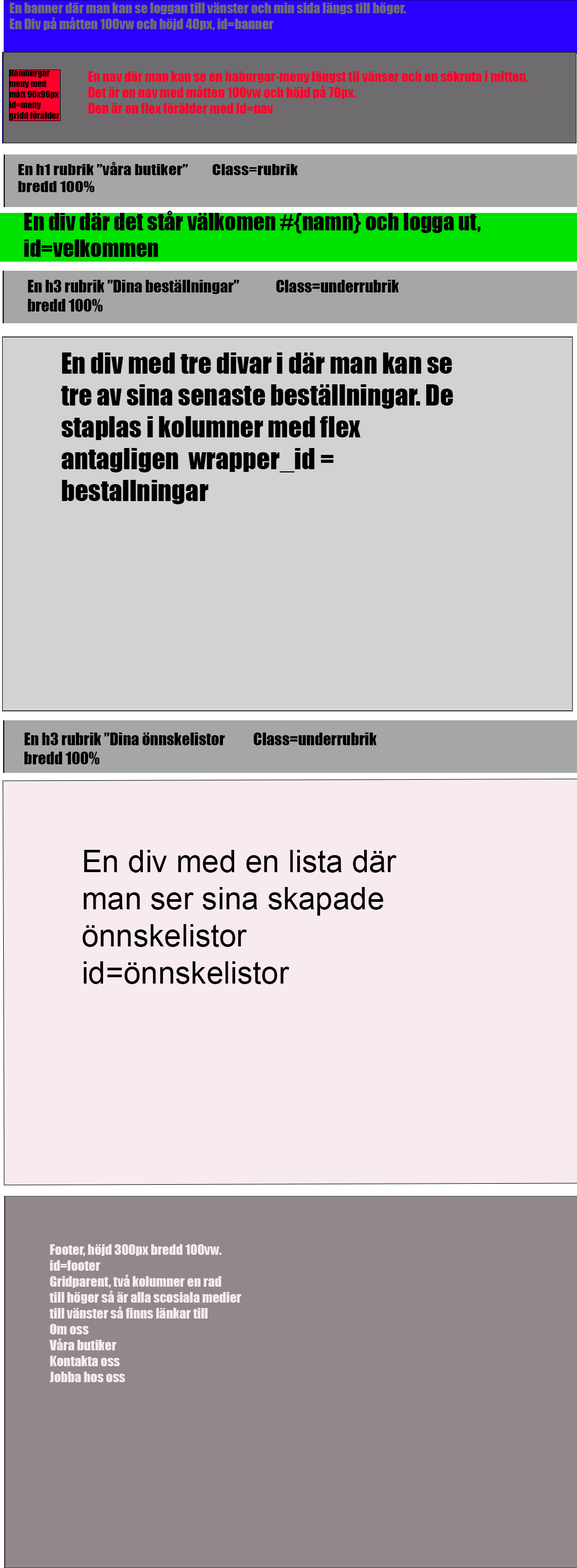
<style>
.page{position:relative;width:577px;height:1568px;background:#f7eaf0}
.page>*{position:absolute;margin:0}
.t1{font:13.3px "Impact";color:#6f6c70}
.t2{font:8.8px "Impact";color:#020202}
.t3{font:13.3px "Impact";color:#ff002a}
.t4{font:14.4px "Impact";color:#000000;scale:1.13 1}
.t5{font:22.1px "Impact";color:#000000}
.t6{font:15.9px "Impact";color:#000000}
.t7{font:26.5px "Impact";color:#000000}
.t8{font:31px "ArialMT";color:#000000}
.t9{font:13.3px "Impact";color:#f7eaf0}
</style>
<div class="page">
<p class="t1" style="left:10px;top:3px;width:396px;height:28px">En banner där man kan se loggan till vänster och min sida längs till höger.<br>En Div på måtten 100vw och höjd 40px, id=banner</p>
<p class="t2" style="left:9px;top:70px;width:50px;height:50px">Hamburgar meny med mått 96x96px<br>id=meny<br>gridd förälder</p>
<p class="t3" style="left:88px;top:71px;width:441px;height:43px">En nav där man kan se en haburgar-meny längst til vänser och en sökruta i mitten.<br>Det är en nav med måtten 100vw och höjd på 70px. <br>Den är en flex förälder med id=nav</p>
<p class="t4" style="left:18px;top:162px;width:280px;height:30px">En h1 rubrik ”våra butiker”  Class=rubrik<br>bredd 100%</p>
<p class="t5" style="left:24px;top:211px;width:457px;height:46px">En div där det står välkomen #{namn} och logga ut,  id=velkommen</p>
<p class="t6" style="left:28px;top:280px;width:371px;height:32px">En h3 rubrik ”Dina beställningar”  Class=underrubrik<br>bredd 100%</p>
<p class="t7" style="left:61px;top:352px;width:392px;height:152px">En div med tre divar i där man kan se tre av sina senaste beställningar. De staplas i kolumner med flex antagligen  wrapper_id = bestallningar</p>
<p class="t6" style="left:24px;top:733px;width:353px;height:31px">En h3 rubrik ”Dina önnskelistor  Class=underrubrik<br>bredd 100%</p>
<p class="t8" style="left:82px;top:850px;width:315px;height:134px">En div med en lista där man ser sina skapade önnskelistor id=önnskelistor</p>
<p class="t9" style="left:49px;top:1244px;width:193px;height:138px">Footer, höjd 300px bredd 100vw.<br>id=footer<br>Gridparent, två kolumner en rad<br>till höger så är alla scosiala medier<br>till vänster så finns länkar till <br>Om oss<br>Våra butiker<br>Kontakta oss<br>Jobba hos oss</p>
</div>
